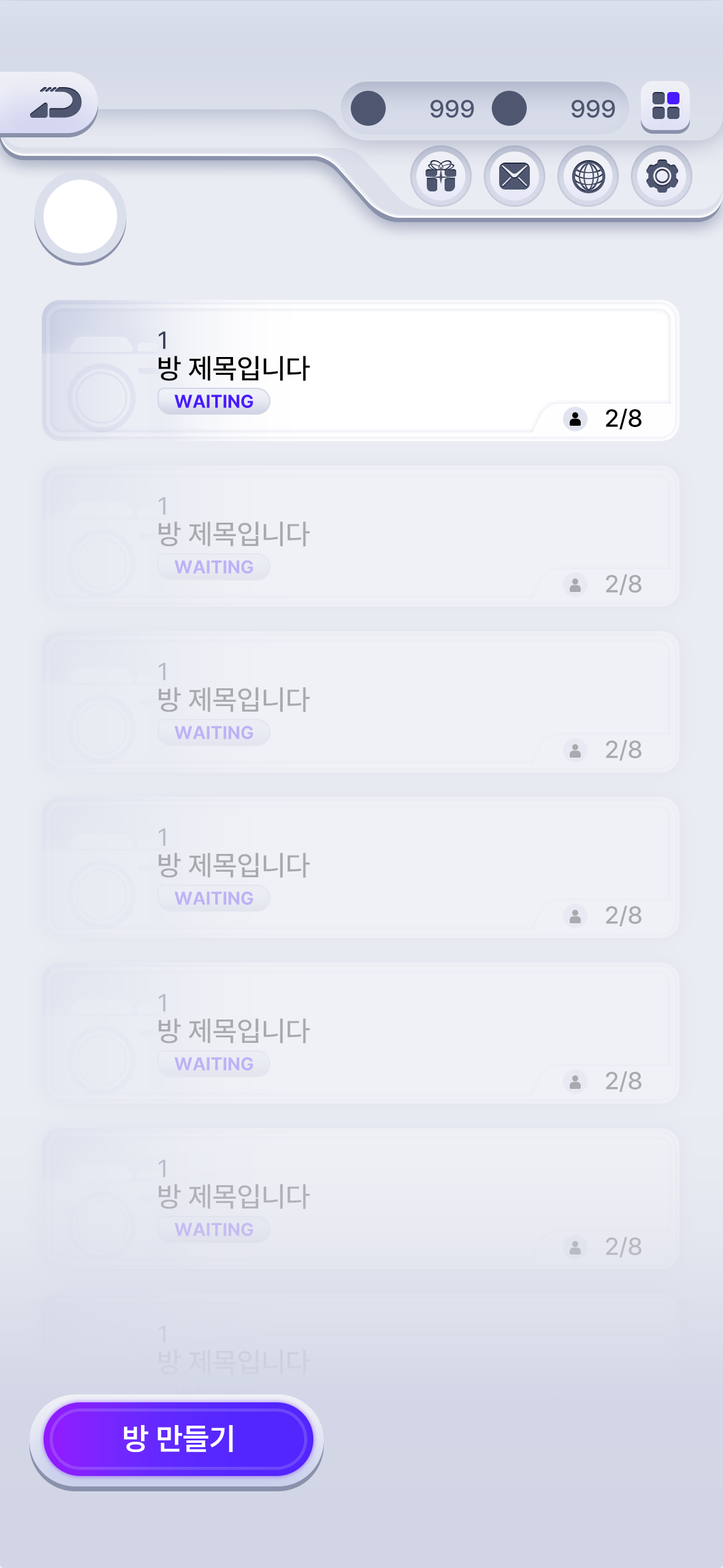
<style>
.page{position:relative;width:723px;height:1568px}
.page>*{position:absolute;margin:0}
.t1{font:24.5px "PretendardVariable-Medium";color:#4e5670}
.t2{font:24.5px "PretendardVariable";color:#353d57}
.t3{font:28.2px "PretendardVariable-Medium";color:#000000}
.t4{font:18.4px "PretendardVariable-Bold";color:#4a1aff}
.t5{font:24.5px "PretendardVariable-Medium";color:#000000}
.t6{font:30.7px "PretendardVariable-SemiBold";color:#ffffff}
</style>
<div class="page">
<p class="t1" style="left:431px;top:99px;width:43px;height:19px">999</p>
<p class="t1" style="left:572px;top:99px;width:43px;height:19px">999</p>
<p class="t2" style="left:159px;top:331px;width:7px;height:18px">1</p>
<p class="t3" style="left:158px;top:356px;width:152px;height:25px">방 제목입니다</p>
<p class="t4" style="left:174px;top:394px;width:79px;height:14px">WAITING</p>
<p class="t5" style="left:606px;top:409px;width:36px;height:20px">2/8</p>
<p class="t6" style="left:124px;top:1425px;width:109px;height:27px">방 만들기</p>
</div>
